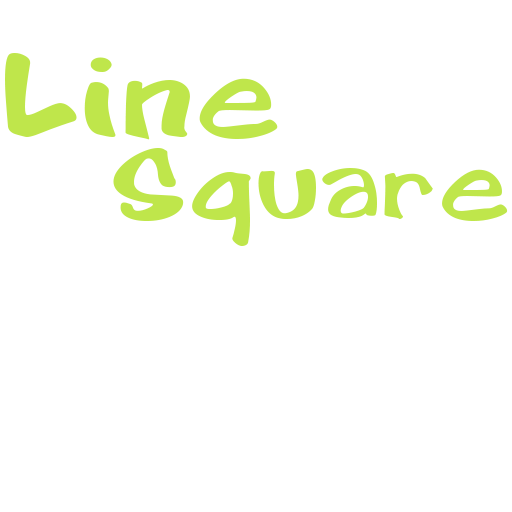
<style>
.page{position:relative;width:512px;height:512px;background:#ffffff}
.page>*{position:absolute;margin:0}
.t1{font:141.4px "ComicXT";color:#bfe64b}
.t2{font:118.8px "ComicXT";color:#bfe64b}
</style>
<div class="page">
<p class="t1" style="left:5px;top:53px;width:273px;height:87px">Line</p>
<p class="t2" style="left:113px;top:148px;width:395px;height:98px">Square</p>
</div>
